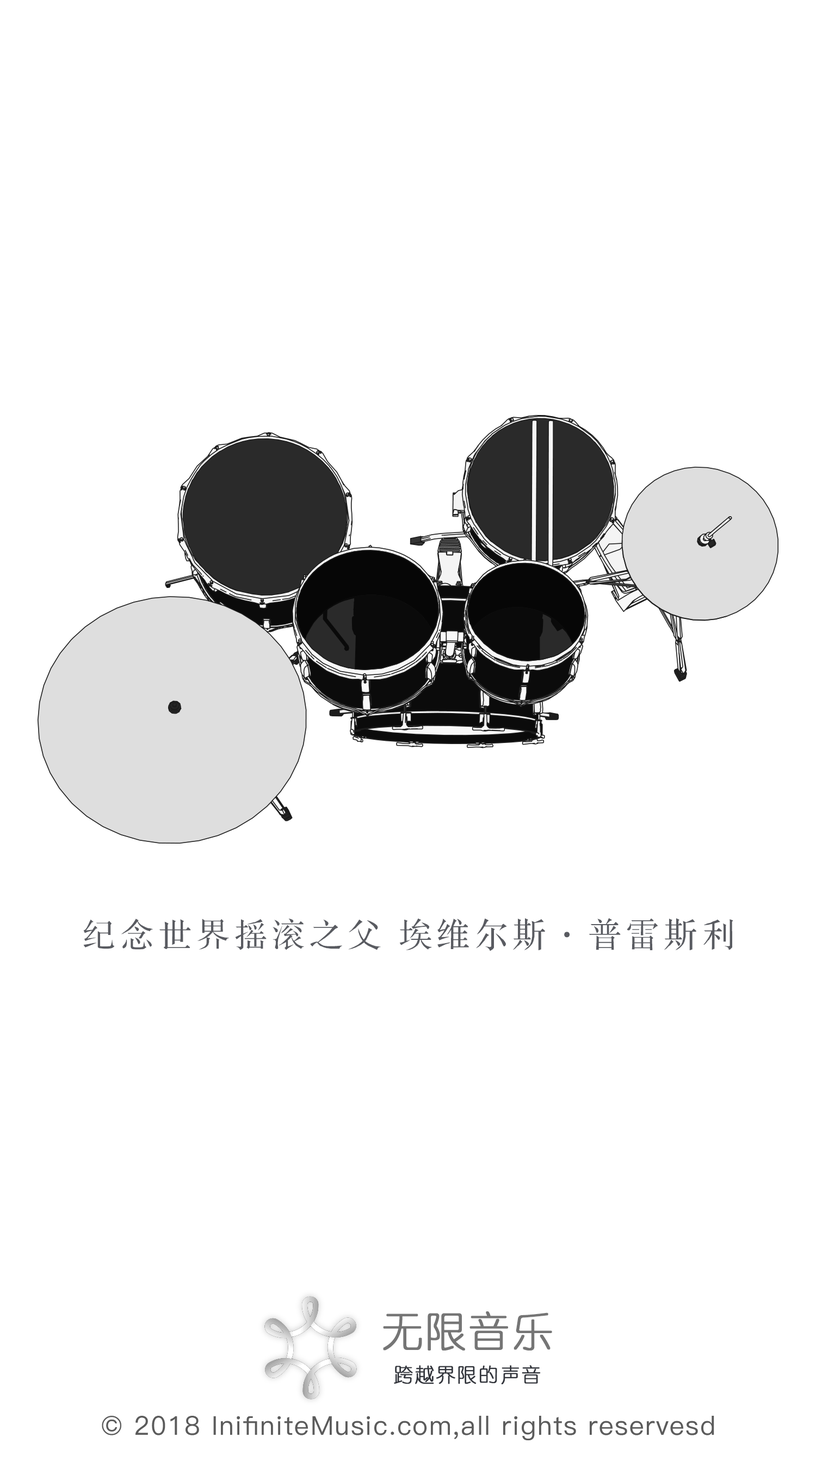
<style>
.page{position:relative;width:816px;height:1462px;background:#ffffff}
.page>*{position:absolute;margin:0}
.t1{font:33.6px "FZS3JW--GB1-0";letter-spacing:0.16em;color:#595b61}
.t2{font:41.3px "YouYuan";letter-spacing:0.02em;color:#757575;font-weight:bold}
.t3{font:19.6px "YouYuan";letter-spacing:0.06em;color:#31343b;font-weight:bold}
.t4{font:26.1px "PingFang-SC-Medium";letter-spacing:0.05em;color:#5b5b5b}
</style>
<div class="page">
<p class="t1" style="left:83px;top:918px;width:650px;height:33px">纪念世界摇滚之父 埃维尔斯·普雷斯利</p>
<p class="t2" style="left:383px;top:1311px;width:169px;height:39px">无限音乐</p>
<p class="t3" style="left:394px;top:1365px;width:147px;height:20px">跨越界限的声音</p>
<p class="t4" style="left:102px;top:1416px;width:612px;height:25px">© 2018 InifiniteMusic.com,all rights reservesd</p>
</div>
